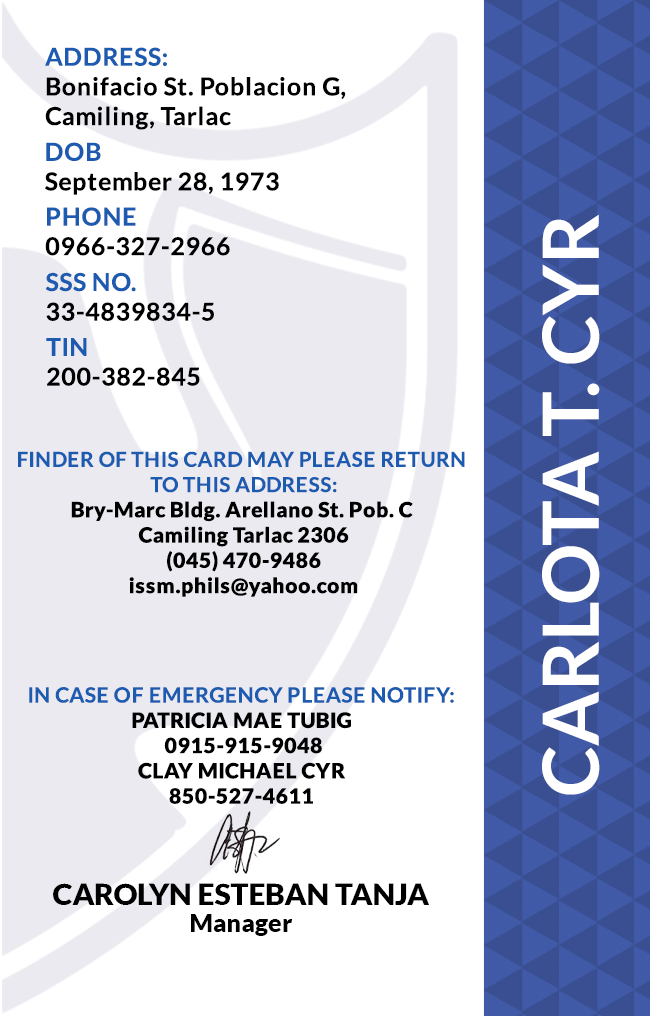
<style>
.page{position:relative;width:650px;height:1016px;background:#ffffff}
.page>*{position:absolute;margin:0}
.t1{font:24.7px/29.6px "Lato-Bold";letter-spacing:0.025em;color:#000000}
.t2{font:24.7px/29.6px "Lato-Bold";letter-spacing:0.025em}
.t3{font:77.6px "Lato-Bold";color:#ffffff}
.t4{font:21.1px "Lato-Black";letter-spacing:0.025em}
.t5{font:20.5px/25.3px "Lato-Bold";letter-spacing:0.025em;text-transform:uppercase}
.t6{font:21.1px/25.3px "Lato-Bold";letter-spacing:0.025em}
.t7{font:29.5px "Lato-Black";color:#000000}
.t8{font:25px "Lato-Black";color:#000000}
</style>
<div class="page">
<p class="t1" style="left:45px;top:47px;width:301px;height:83px">ADDRESS:<br>Bonifacio St. Poblacion G,<br>Camiling, Tarlac</p>
<p class="t1" style="left:45px;top:142px;width:234px;height:53px">DOB<br>September 28, 1973</p>
<p class="t2" style="left:45px;top:207px;width:185px;height:49px">PHONE <br>0966-327-2966</p>
<p class="t3" style="left:542px;top:214px;width:58px;height:581px;rotate:-90deg">CARLOTA T. CYR</p>
<p class="t2" style="left:45px;top:272px;width:169px;height:49px">SSS NO.<br>33-4839834-5</p>
<p class="t1" style="left:46px;top:338px;width:154px;height:48px">TIN<br>200-382-845</p>
<p class="t4" style="left:18px;top:451px;width:447px;height:146px;text-align:center"><span class="t5">Finder of this card may please return <br>to this address:<br></span>Bry-Marc Bldg. Arellano St. Pob. C <br>Camiling Tarlac 2306<br>(045) 470-9486<br>issm.phils@yahoo.com</p>
<p class="t4" style="left:29px;top:687px;width:425px;height:117px;text-align:center"><span class="t6">IN CASE OF EMERGENCY PLEASE NOTIFY:<br></span>PATRICIA MAE TUBIG<br> 0915-915-9048<br>CLAY MICHAEL CYR<br>850-527-4611</p>
<p class="t7" style="left:53px;top:883px;width:376px;height:22px">CAROLYN ESTEBAN TANJA</p>
<p class="t8" style="left:191px;top:914px;width:102px;height:22px">Manager</p>
</div>
